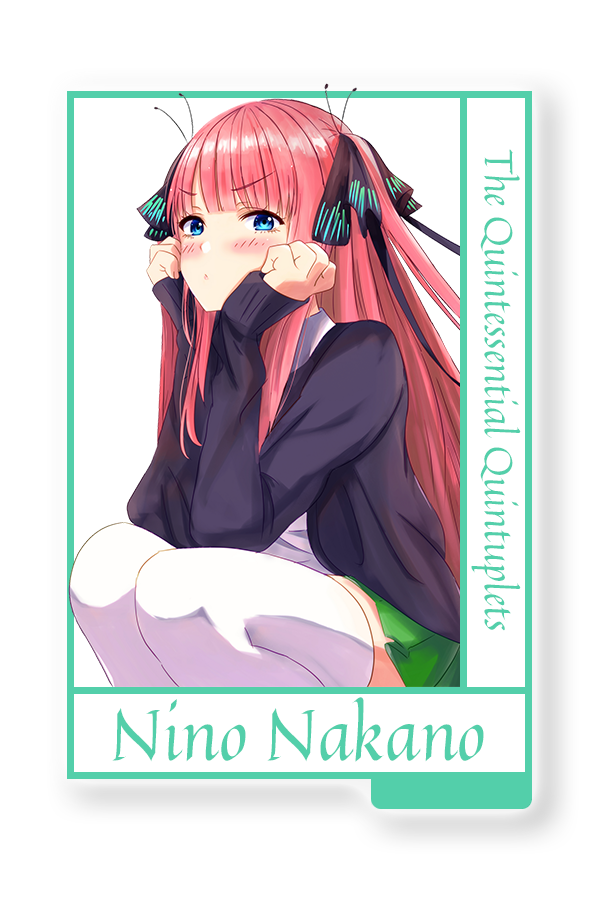
<style>
.page{position:relative;width:600px;height:900px;background:#ffffff}
.page>*{position:absolute;margin:0}
.t1{font:39px "Quintessential-Regular";color:#53cfaa}
.t2{font:70.1px "Quintessential-Regular";color:#53cfaa}
</style>
<div class="page">
<p class="t1" style="left:471px;top:149px;width:50px;height:482px;rotate:90deg">The Quintessential Quintuplets</p>
<p class="t2" style="left:112px;top:697px;width:372px;height:65px">Nino Nakano</p>
</div>
